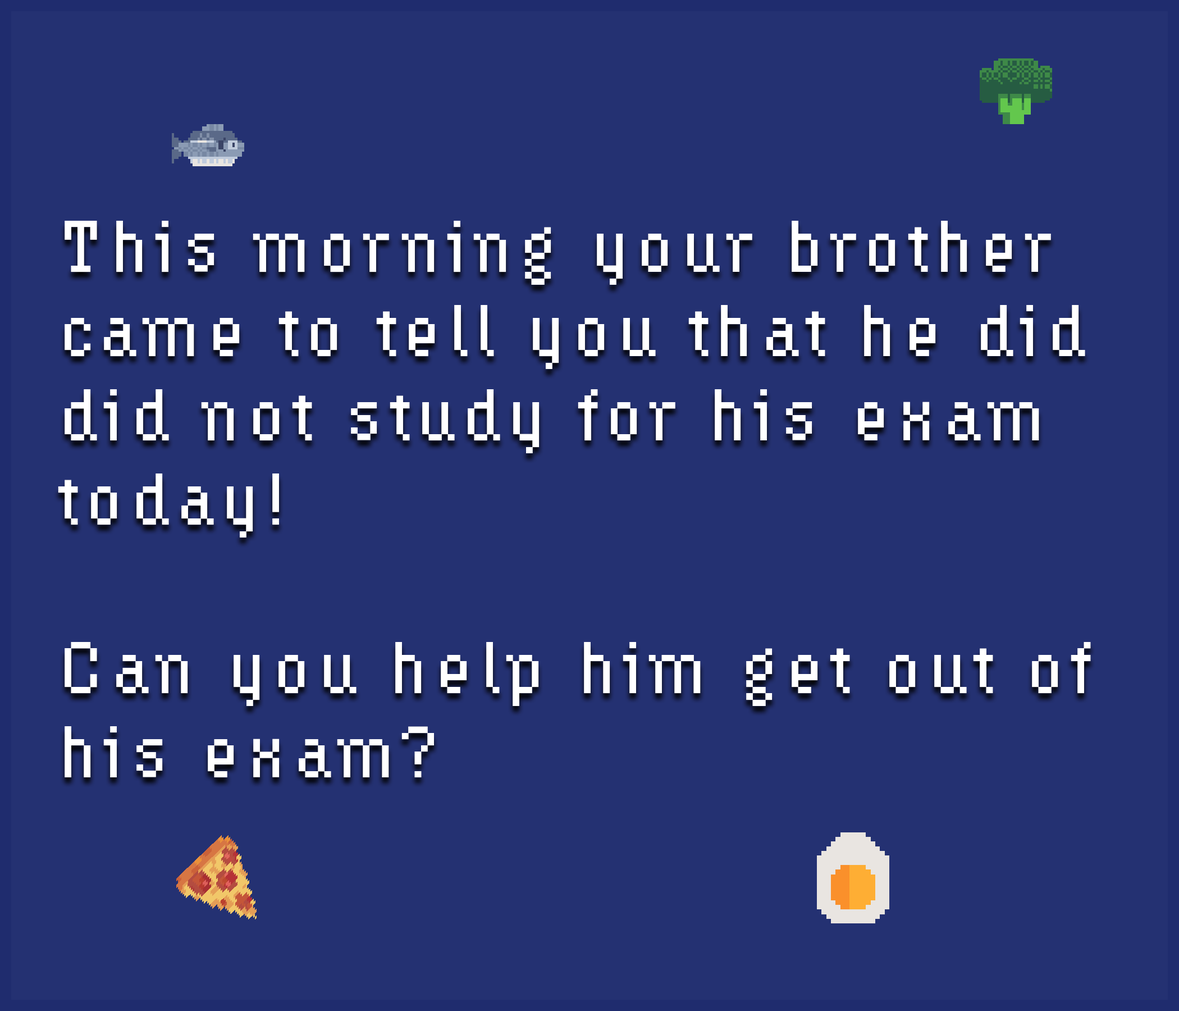
<style>
.page{position:relative;width:1179px;height:1011px;background:#243172}
.page>*{position:absolute;margin:0}
.t1{font:70.2px "HydrophiliaIced";letter-spacing:0.1em;color:#ffffff}
</style>
<div class="page">
<p class="t1" style="left:58px;top:221px;width:1033px;height:556px">This morning your brother <br>came to tell you that he did <br>did not study for his exam <br>today! <br><br>Can you help him get out of <br>his exam?</p>
</div>
